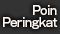
<style>
.page{position:relative;width:60px;height:34px;background:#333333}
.page>*{position:absolute;margin:0}
.t1{font:12px/12px "GothicMB101Pro-Medium";letter-spacing:-0.04em;color:#fef7f2;scale:0.9 1}
</style>
<div class="page">
<p class="t1" style="left:3px;top:5px;width:55px;height:24px;text-align:right">Poin<br>Peringkat</p>
</div>
